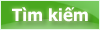
<style>
.page{position:relative;width:100px;height:30px}
.page>*{position:absolute;margin:0}
.t1{font:16.7px "Tahoma-Bold";color:#ffffff}
</style>
<div class="page">
<p class="t1" style="left:12px;top:7px;width:76px;height:15px">Tìm kiếm</p>
</div>
